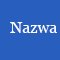
<style>
.page{position:relative;width:60px;height:60px;background:#285ebd}
.page>*{position:absolute;margin:0}
.t1{font:16px "Georgia";color:#ffffff}
</style>
<div class="page">
<p class="t1" style="left:10px;top:22px;width:47px;height:11px">Nazwa</p>
</div>
